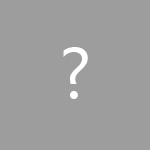
<style>
.page{position:relative;width:150px;height:150px;background:#9d9d9d}
.page>*{position:absolute;margin:0}
.t1{font:72px "SegoeUI";color:#ffffff}
</style>
<div class="page">
<p class="t1" style="left:63px;top:47px;width:25px;height:52px">?</p>
</div>
